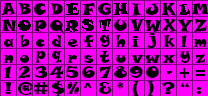
<style>
.page{position:relative;width:208px;height:96px;background:#ff00ff}
.page>*{position:absolute;margin:0}
.t1{font:12px "SnapITC-Regular";color:#000000}
</style>
<div class="page">
<p class="t1" style="left:1px;top:3px;width:16px;height:12px">A</p>
<p class="t1" style="left:17px;top:3px;width:14px;height:12px">B</p>
<p class="t1" style="left:34px;top:3px;width:12px;height:12px">C</p>
<p class="t1" style="left:49px;top:3px;width:14px;height:12px">D</p>
<p class="t1" style="left:66px;top:3px;width:13px;height:12px">E</p>
<p class="t1" style="left:82px;top:3px;width:14px;height:12px">F</p>
<p class="t1" style="left:98px;top:3px;width:14px;height:12px">G</p>
<p class="t1" style="left:114px;top:3px;width:14px;height:12px">H</p>
<p class="t1" style="left:131px;top:3px;width:11px;height:13px">I</p>
<p class="t1" style="left:145px;top:3px;width:14px;height:12px">J</p>
<p class="t1" style="left:161px;top:3px;width:16px;height:13px">K</p>
<p class="t1" style="left:179px;top:4px;width:11px;height:12px">L</p>
<p class="t1" style="left:192px;top:3px;width:18px;height:12px">M</p>
<p class="t1" style="left:1px;top:19px;width:16px;height:12px">N</p>
<p class="t1" style="left:18px;top:20px;width:13px;height:11px">O</p>
<p class="t1" style="left:33px;top:20px;width:14px;height:12px">P</p>
<p class="t1" style="left:50px;top:20px;width:15px;height:14px">Q</p>
<p class="t1" style="left:65px;top:20px;width:13px;height:12px">R</p>
<p class="t1" style="left:82px;top:19px;width:12px;height:12px">S</p>
<p class="t1" style="left:99px;top:19px;width:12px;height:12px">T</p>
<p class="t1" style="left:114px;top:19px;width:13px;height:12px">U</p>
<p class="t1" style="left:129px;top:19px;width:16px;height:12px">V</p>
<p class="t1" style="left:144px;top:20px;width:19px;height:12px">W</p>
<p class="t1" style="left:161px;top:19px;width:17px;height:13px">X</p>
<p class="t1" style="left:176px;top:19px;width:18px;height:13px">Y</p>
<p class="t1" style="left:194px;top:19px;width:14px;height:13px">Z</p>
<p class="t1" style="left:4px;top:39px;width:10px;height:8px">a</p>
<p class="t1" style="left:19px;top:35px;width:11px;height:12px">b</p>
<p class="t1" style="left:36px;top:39px;width:9px;height:8px">c</p>
<p class="t1" style="left:52px;top:35px;width:10px;height:12px">d</p>
<p class="t1" style="left:68px;top:39px;width:10px;height:8px">e</p>
<p class="t1" style="left:83px;top:35px;width:11px;height:12px">f</p>
<p class="t1" style="left:100px;top:35px;width:10px;height:12px">g</p>
<p class="t1" style="left:115px;top:35px;width:11px;height:12px">h</p>
<p class="t1" style="left:131px;top:36px;width:9px;height:11px">i</p>
<p class="t1" style="left:147px;top:33px;width:10px;height:15px">j</p>
<p class="t1" style="left:163px;top:35px;width:12px;height:13px">k</p>
<p class="t1" style="left:180px;top:35px;width:7px;height:12px">l</p>
<p class="t1" style="left:193px;top:39px;width:14px;height:8px">m</p>
<p class="t1" style="left:35px;top:51px;width:11px;height:12px">p</p>
<p class="t1" style="left:52px;top:51px;width:10px;height:12px">q</p>
<p class="t1" style="left:99px;top:51px;width:11px;height:12px">t</p>
<p class="t1" style="left:180px;top:51px;width:10px;height:12px">y</p>
<p class="t1" style="left:195px;top:54px;width:11px;height:9px">z</p>
<p class="t1" style="left:3px;top:55px;width:11px;height:8px">n</p>
<p class="t1" style="left:20px;top:55px;width:10px;height:8px">o</p>
<p class="t1" style="left:67px;top:55px;width:11px;height:8px">r</p>
<p class="t1" style="left:83px;top:55px;width:11px;height:8px">s</p>
<p class="t1" style="left:116px;top:55px;width:10px;height:8px">u</p>
<p class="t1" style="left:131px;top:55px;width:14px;height:8px">v</p>
<p class="t1" style="left:144px;top:55px;width:17px;height:8px">w</p>
<p class="t1" style="left:162px;top:55px;width:14px;height:8px">x</p>
<p class="t1" style="left:3px;top:66px;width:9px;height:12px">1</p>
<p class="t1" style="left:18px;top:66px;width:13px;height:12px">2</p>
<p class="t1" style="left:34px;top:66px;width:14px;height:12px">3</p>
<p class="t1" style="left:49px;top:66px;width:15px;height:12px">4</p>
<p class="t1" style="left:66px;top:66px;width:13px;height:12px">5</p>
<p class="t1" style="left:82px;top:66px;width:13px;height:12px">6</p>
<p class="t1" style="left:99px;top:66px;width:13px;height:12px">7</p>
<p class="t1" style="left:114px;top:66px;width:13px;height:12px">8</p>
<p class="t1" style="left:130px;top:66px;width:13px;height:12px">9</p>
<p class="t1" style="left:146px;top:66px;width:13px;height:12px">0</p>
<p class="t1" style="left:167px;top:71px;width:5px;height:3px">-</p>
<p class="t1" style="left:179px;top:68px;width:11px;height:10px">+</p>
<p class="t1" style="left:195px;top:70px;width:11px;height:6px">=</p>
<p class="t1" style="left:3px;top:82px;width:12px;height:12px">!</p>
<p class="t1" style="left:18px;top:82px;width:15px;height:13px">@</p>
<p class="t1" style="left:34px;top:82px;width:14px;height:12px">#</p>
<p class="t1" style="left:51px;top:81px;width:14px;height:15px">$</p>
<p class="t1" style="left:66px;top:82px;width:14px;height:12px">%</p>
<p class="t1" style="left:83px;top:83px;width:9px;height:5px">^</p>
<p class="t1" style="left:99px;top:82px;width:13px;height:12px">&amp;</p>
<p class="t1" style="left:117px;top:82px;width:7px;height:7px">*</p>
<p class="t1" style="left:132px;top:81px;width:7px;height:15px">(</p>
<p class="t1" style="left:147px;top:81px;width:7px;height:15px">)</p>
<p class="t1" style="left:161px;top:82px;width:14px;height:12px">?</p>
<p class="t1" style="left:180px;top:81px;width:10px;height:6px">“</p>
<p class="t1" style="left:196px;top:87px;width:6px;height:7px">:</p>
</div>
